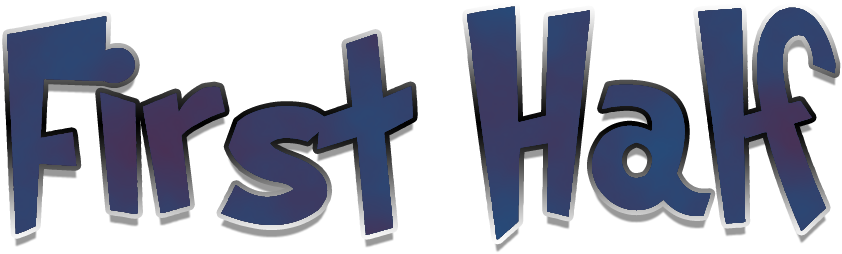
<style>
.page{position:relative;width:842px;height:254px;background:#ffffff}
.page>*{position:absolute;margin:0}
.t1{font:250px "Grinched";color:#35406a}
</style>
<div class="page">
<p class="t1" style="left:7px;top:6px;width:829px;height:234px">First Half</p>
</div>
